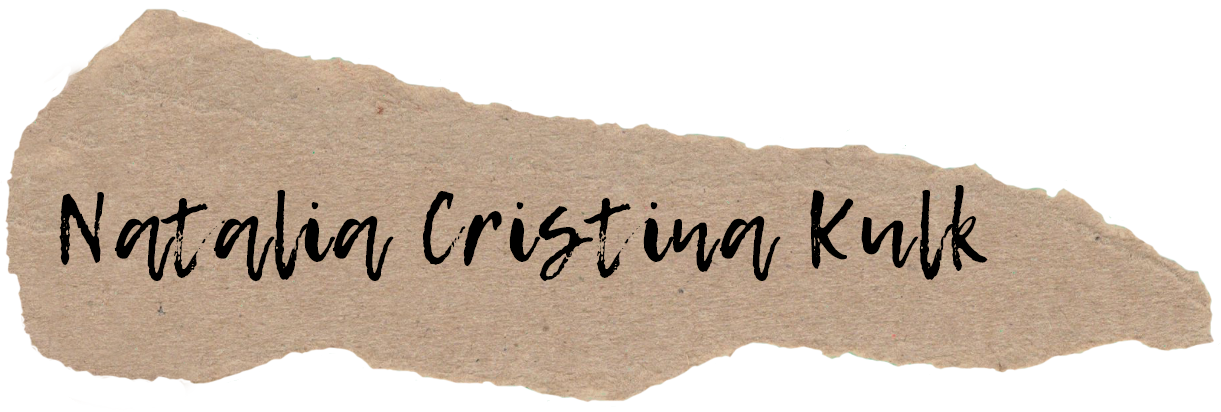
<style>
.page{position:relative;width:1221px;height:412px;background:#ffffff}
.page>*{position:absolute;margin:0}
.t1{font:93.9px "LemonTuesday";letter-spacing:0.05em;color:#000000}
</style>
<div class="page">
<p class="t1" style="left:59px;top:185px;width:929px;height:96px">Natalia Cristina Kulk</p>
</div>
